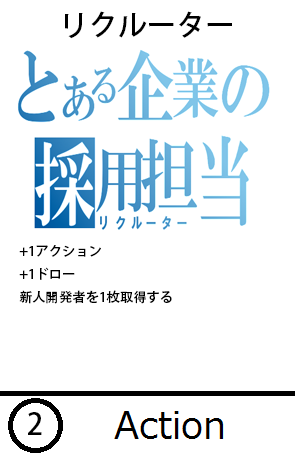
<style>
.page{position:relative;width:295px;height:460px;background:#ffffff}
.page>*{position:absolute;margin:0}
.t1{font:29.3px "AdobeHeitiStd-Regular";color:#000000}
.t2{font:13.3px "AdobeHeitiStd-Regular";color:#000000}
</style>
<div class="page">
<p class="t1" style="left:65px;top:11px;width:167px;height:28px">リクルーター</p>
<p class="t2" style="left:19px;top:245px;width:153px;height:59px">+1アクション<br>+1ドロー<br>新人開発者を1枚取得する</p>
<p class="t1" style="left:28px;top:412px;width:14px;height:23px">2</p>
</div>
